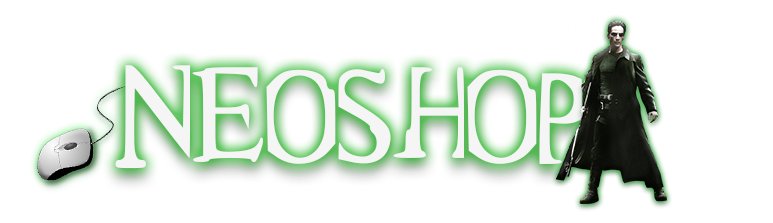
<style>
.page{position:relative;width:773px;height:223px;background:#ffffff}
.page>*{position:absolute;margin:0}
.t1{font:161.2px "matrix";color:#f5f5f5}
</style>
<div class="page">
<p class="t1" style="left:115px;top:65px;width:467px;height:104px">neoshop</p>
</div>
